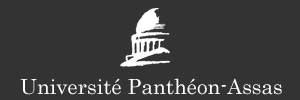
<style>
.page{position:relative;width:300px;height:100px;background:#333333}
.page>*{position:absolute;margin:0}
.t1{font:20.8px "Century";color:#ffffff}
</style>
<div class="page">
<p class="t1" style="left:20px;top:78px;width:262px;height:17px">Université Panthéon-Assas</p>
</div>
